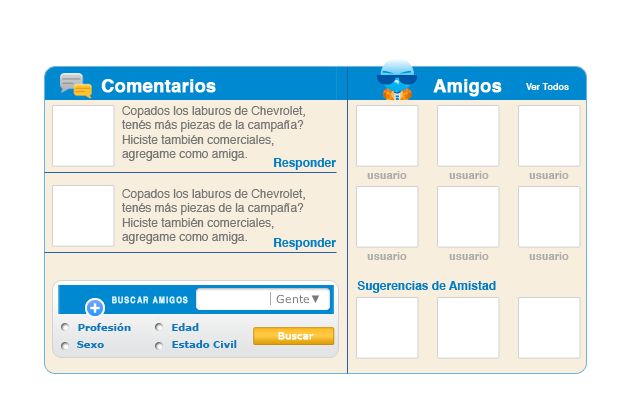
<style>
.page{position:relative;width:634px;height:408px;background:#ffffff}
.page>*{position:absolute;margin:0}
.t1{font:18px "Helvetica-Bold";color:#ffffff;font-weight:bold}
.t2{font:9px "Helvetica-Bold";color:#ffffff}
.t3{font:12px "Helvetica";color:#747575}
.t4{font:12px "Helvetica-Bold";color:#007dc6}
.t5{font:11px "Helvetica-Bold";color:#acacac}
.t6{font:9px "Helvetica-Bold";letter-spacing:0.14em;color:#e4f5fd;font-weight:bold;scale:0.8 1}
.t7{font:10px "Verdana-Bold";color:#0f76bc}
.t8{font:10px "Verdana";color:#ffffff;font-weight:bold}
</style>
<div class="page">
<p class="t1" style="left:101px;top:79px;width:115px;height:14px">Comentarios</p>
<p class="t1" style="left:433px;top:79px;width:69px;height:18px">Amigos</p>
<p class="t2" style="left:526px;top:83px;width:43px;height:7px">Ver Todos</p>
<p class="t3" style="left:122px;top:106px;width:183px;height:55px">Copados los laburos de Chevrolet,<br>tenés más piezas de la campaña?<br>Hiciste también comerciales,<br>agregame como amiga.</p>
<p class="t4" style="left:274px;top:158px;width:62px;height:12px">Responder</p>
<p class="t5" style="left:367px;top:171px;width:40px;height:8px">usuario</p>
<p class="t5" style="left:449px;top:171px;width:40px;height:8px">usuario</p>
<p class="t5" style="left:529px;top:171px;width:40px;height:8px">usuario</p>
<p class="t3" style="left:122px;top:189px;width:183px;height:55px">Copados los laburos de Chevrolet,<br>tenés más piezas de la campaña?<br>Hiciste también comerciales,<br>agregame como amiga.</p>
<p class="t4" style="left:274px;top:238px;width:62px;height:12px">Responder</p>
<p class="t5" style="left:367px;top:252px;width:40px;height:8px">usuario</p>
<p class="t5" style="left:449px;top:252px;width:40px;height:8px">usuario</p>
<p class="t5" style="left:529px;top:252px;width:40px;height:8px">usuario</p>
<p class="t4" style="left:357px;top:281px;width:139px;height:12px">Sugerencias de Amistad</p>
<p class="t6" style="left:112px;top:296px;width:76px;height:8px">BUSCAR AMIGOS</p>
<p class="t7" style="left:78px;top:323px;width:53px;height:8px">Profesión</p>
<p class="t7" style="left:172px;top:323px;width:27px;height:8px">Edad</p>
<p class="t7" style="left:77px;top:341px;width:27px;height:7px">Sexo</p>
<p class="t7" style="left:172px;top:340px;width:65px;height:8px">Estado Civil</p>
<p class="t8" style="left:278px;top:332px;width:36px;height:8px">Buscar</p>
</div>
